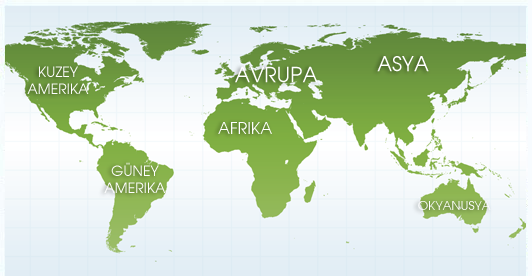
<style>
.page{position:relative;width:532px;height:276px}
.page>*{position:absolute;margin:0}
.t1{font:20px "TRAvalonPlain";color:#ffffff}
.t2{font:14px "TRAvalonPlain";color:#ffffff}
.t3{font:20.6px "TRAvalonPlain";color:#ffffff}
.t4{font:16px "TRAvalonPlain";color:#ffffff}
.t5{font:12.1px "TRAvalonPlain";color:#ffffff}
</style>
<div class="page">
<p class="t1" style="left:377px;top:56px;width:52px;height:16px">ASYA</p>
<p class="t2" style="left:27px;top:66px;width:62px;height:28px;text-align:center">KUZEY<br>AMERIKA</p>
<p class="t3" style="left:235px;top:66px;width:83px;height:17px">AVRUPA</p>
<p class="t4" style="left:218px;top:122px;width:54px;height:12px">AFRIKA</p>
<p class="t2" style="left:104px;top:162px;width:62px;height:31px;text-align:center">GÜNEY<br>AMERIKA</p>
<p class="t5" style="left:418px;top:201px;width:73px;height:9px">OKYANUSYA</p>
</div>
